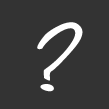
<style>
.page{position:relative;width:109px;height:109px;background:#333333}
.page>*{position:absolute;margin:0}
.t1{font:72px "Kosalsayshy";color:#ffffff}
</style>
<div class="page">
<p class="t1" style="left:37px;top:22px;width:46px;height:70px">?</p>
</div>
